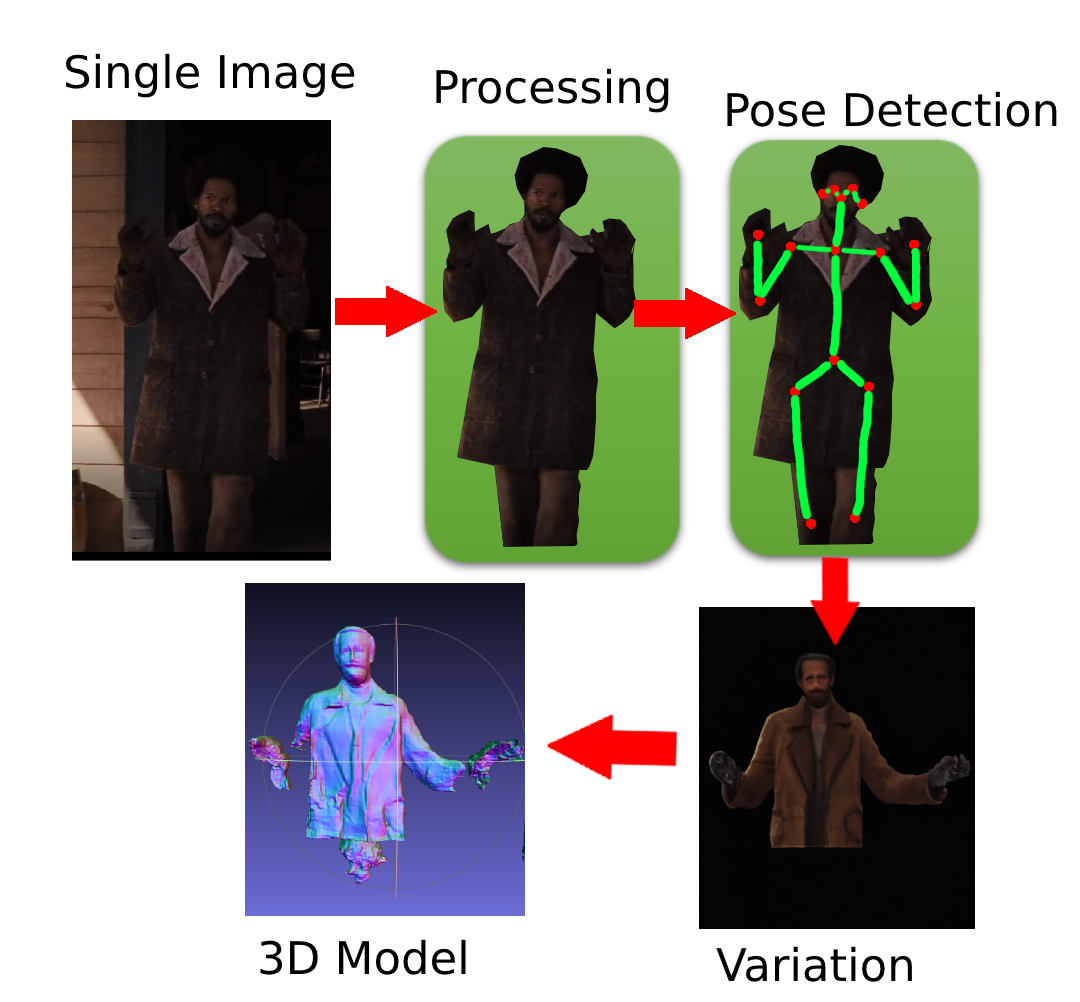
<style>
.page{position:relative;width:1080px;height:1002px;background:#ffffff}
.page>*{position:absolute;margin:0}
.t1{font:45px "DejaVuSans";color:#000000}
</style>
<div class="page">
<p class="t1" style="left:65px;top:53px;width:290px;height:45px">Single Image</p>
<p class="t1" style="left:436px;top:68px;width:233px;height:45px">Processing</p>
<p class="t1" style="left:727px;top:91px;width:330px;height:36px">Pose Detection</p>
<p class="t1" style="left:260px;top:939px;width:206px;height:36px">3D Model</p>
<p class="t1" style="left:716px;top:946px;width:196px;height:36px">Variation</p>
</div>
